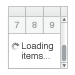
<style>
.page{position:relative;width:75px;height:75px;background:#ffffff}
.page>*{position:absolute;margin:0}
.t1{font:9px "Helvetica-Bold";color:#a5a5a5}
.t2{font:9px/10px "Helvetica"}
</style>
<div class="page">
<p class="t1" style="left:14px;top:21px;width:41px;height:7px">7     8     9</p>
<p class="t2" style="left:22px;top:42px;width:31px;height:17px">Loading<br>items...</p>
</div>
